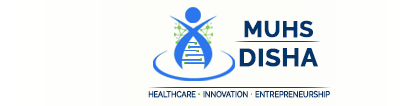
<style>
.page{position:relative;width:418px;height:106px;background:#fdfdfa}
.page>*{position:absolute;margin:0}
.t1{font:24.8px/29.1px "Raleway-Bold";letter-spacing:0.013em;color:#01356b;font-weight:bold}
.t2{font:22.7px/29.1px "Raleway-Bold";letter-spacing:0.013em;color:#01356b;font-weight:bold}
.t3{font:8.2px "Raleway-Light";color:#01356b;font-weight:bold;scale:0.87 1}
</style>
<div class="page">
<p class="t1" style="left:239px;top:20px;width:79px;height:47px;text-align:center"><span class="t2">MUHS<br></span>DISHA</p>
<p class="t3" style="left:148px;top:90px;width:48px;height:8px">HEALTHCARE</p>
<p class="t3" style="left:203px;top:90px;width:45px;height:8px">INNOVATION</p>
<p class="t3" style="left:255px;top:90px;width:75px;height:8px">ENTREPRENEURSHIP</p>
</div>
